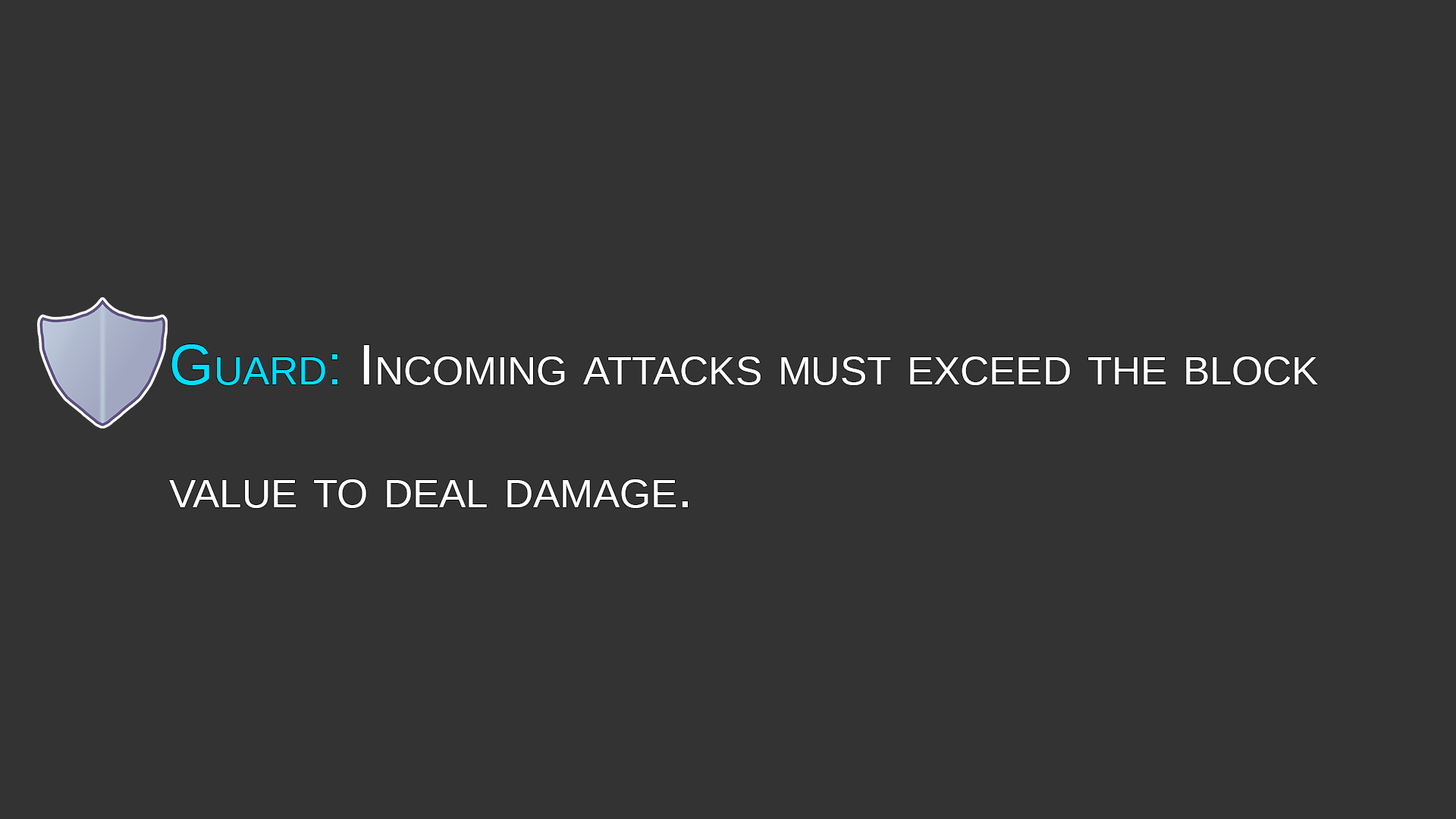
<style>
.page{position:relative;width:1456px;height:819px;background:#333333}
.page>*{position:absolute;margin:0}
.t1{font:98px "LiberationSans";color:#ffffff;font-variant:small-caps}
.t2{font:98px "LiberationSans";color:#00deff;font-variant:small-caps}
</style>
<div class="page">
<p class="t1" style="left:169px;top:344px;width:1149px;height:164px"><span class="t2">Guard:</span> Incoming attacks must exceed the block value to deal damage.</p>
</div>
